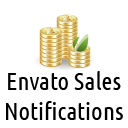
<style>
.page{position:relative;width:128px;height:128px;background:#ffffff}
.page>*{position:absolute;margin:0}
.t1{font:25px "UbuntuCondensed-Regular";color:#000000}
</style>
<div class="page">
<p class="t1" style="left:6px;top:71px;width:117px;height:49px;text-align:center">Envato Sales<br>Notifications</p>
</div>
